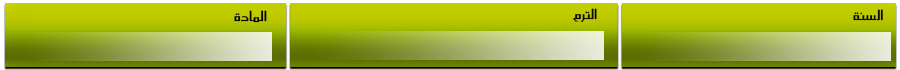
<style>
.page{position:relative;width:900px;height:70px}
.page>*{position:absolute;margin:0}
.t1{font:17px "SC_KHALID";color:#020202}
.t2{font:17px "SC_KHALID";color:#070707}
</style>
<div class="page">
<p class="t1" style="left:234px;top:10px;width:33px;height:13px">المادة</p>
<p class="t2" style="left:573px;top:8px;width:24px;height:14px">الترم</p>
<p class="t2" style="left:853px;top:9px;width:30px;height:12px">السنة</p>
</div>
